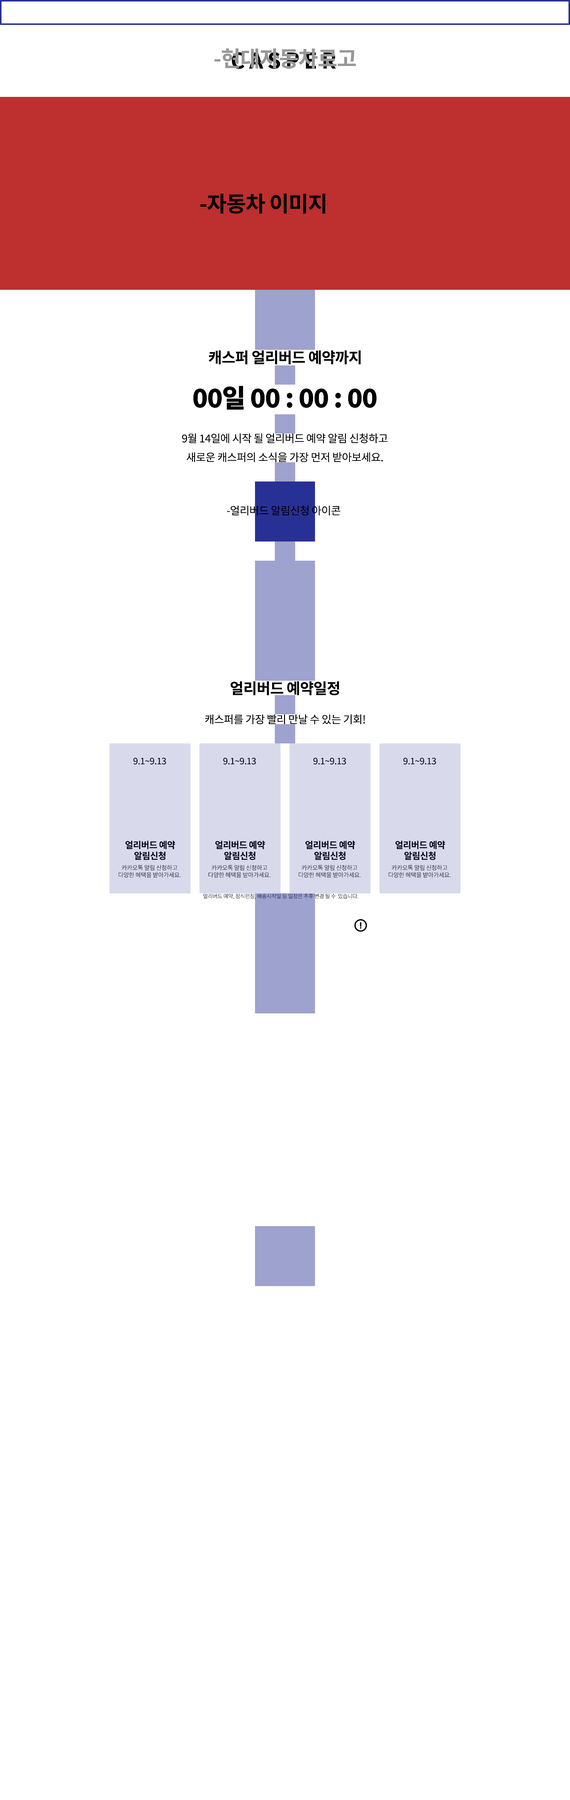
<style>
.page{position:relative;width:570px;height:1800px;background:#ffffff}
.page>*{position:absolute;margin:0}
.t1{font:21.6px "NotoSansKR-Bold";letter-spacing:0.2em}
.t2{font:21.6px "NotoSansKR-Bold";letter-spacing:-0.025em;color:#010101}
.t3{font:15px "NotoSansKR-Bold";letter-spacing:-0.025em;color:#000000}
.t4{font:25.5px "NotoSansKR-Black";letter-spacing:-0.025em;color:#000000}
.t5{font:10.8px "NotoSansKR-Regular";letter-spacing:-0.025em;color:#000000}
.t6{font:9px "NotoSansKR-Regular";letter-spacing:-0.025em;color:#07091b}
.t7{font:9px/10.8px "NotoSansKR-Bold";letter-spacing:-0.025em;color:#07091b}
.t8{font:6px/7.2px "NotoSansKR-Light";letter-spacing:-0.025em;color:#07091b}
.t9{font:5.4px "NotoSansKR-Light";letter-spacing:-0.025em}
</style>
<div class="page">
<p class="t1" style="left:232px;top:52px;width:104px;height:17px">CASPER</p>
<p class="t2" style="left:200px;top:194px;width:126px;height:20px">-자동차 이미지</p>
<p class="t3" style="left:209px;top:350px;width:152px;height:14px">캐스퍼 얼리버드 예약까지</p>
<p class="t4" style="left:193px;top:386px;width:183px;height:24px">00일 00 : 00 : 00</p>
<p class="t5" style="left:182px;top:433px;width:206px;height:29px;text-align:center">9월 14일에 시작 될 얼리버드 예약 알림 신청하고<br>새로운 캐스퍼의 소식을 가장 먼저 받아보세요.</p>
<p class="t5" style="left:227px;top:506px;width:113px;height:10px">-얼리버드 알림신청 아이콘</p>
<p class="t3" style="left:230px;top:681px;width:109px;height:14px">얼리버드 예약일정</p>
<p class="t5" style="left:205px;top:714px;width:160px;height:10px">캐스퍼를 가장 빨리 만날 수 있는 기회!</p>
<p class="t6" style="left:133px;top:758px;width:33px;height:7px">9.1~9.13</p>
<p class="t6" style="left:223px;top:758px;width:33px;height:7px">9.1~9.13</p>
<p class="t6" style="left:313px;top:758px;width:33px;height:7px">9.1~9.13</p>
<p class="t6" style="left:403px;top:758px;width:33px;height:7px">9.1~9.13</p>
<p class="t7" style="left:125px;top:841px;width:50px;height:19px;text-align:center">얼리버드 예약<br>알림신청</p>
<p class="t7" style="left:215px;top:841px;width:50px;height:19px;text-align:center">얼리버드 예약<br>알림신청</p>
<p class="t7" style="left:305px;top:841px;width:50px;height:19px;text-align:center">얼리버드 예약<br>알림신청</p>
<p class="t7" style="left:395px;top:841px;width:50px;height:19px;text-align:center">얼리버드 예약<br>알림신청</p>
<p class="t8" style="left:118px;top:865px;width:63px;height:13px;text-align:center">카카오톡 알림 신청하고<br>다양한 혜택을 받아가세요.</p>
<p class="t8" style="left:208px;top:865px;width:63px;height:13px;text-align:center">카카오톡 알림 신청하고<br>다양한 혜택을 받아가세요.</p>
<p class="t8" style="left:298px;top:865px;width:63px;height:13px;text-align:center">카카오톡 알림 신청하고<br>다양한 혜택을 받아가세요.</p>
<p class="t8" style="left:388px;top:865px;width:63px;height:13px;text-align:center">카카오톡 알림 신청하고<br>다양한 혜택을 받아가세요.</p>
<p class="t9" style="left:203px;top:893px;width:155px;height:6px">얼리버드 예약, 정식런칭, 배송시작일 등 일정은 추후 변경 될 수  있습니다.</p>
</div>
